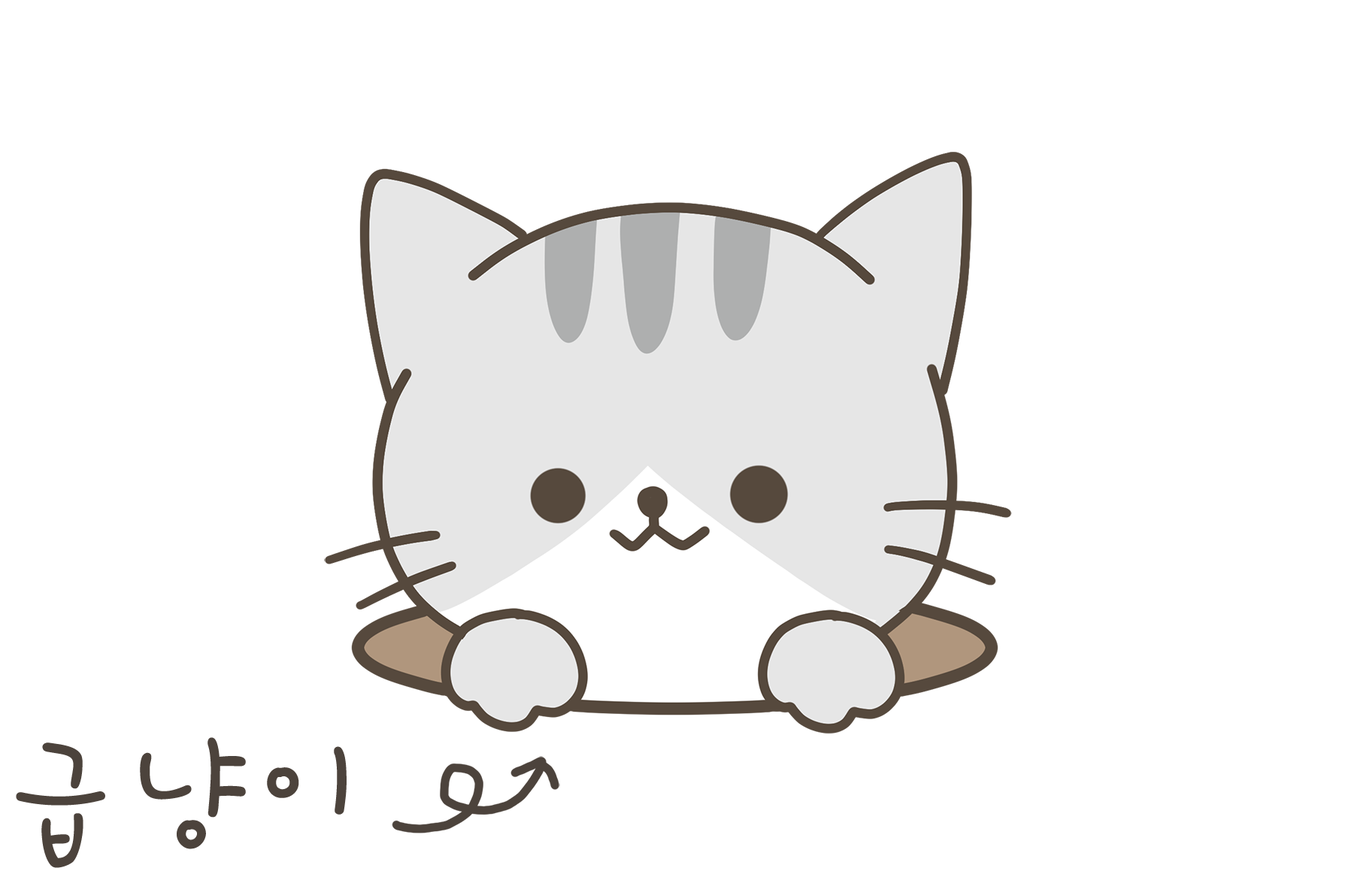
<style>
.page{position:relative;width:1360px;height:877px;background:#ffffff}
.page>*{position:absolute;margin:0}
.t1{font:153.5px "HiMelody-Regular";color:#4c433c}
</style>
<div class="page">
<p class="t1" style="left:16px;top:737px;width:330px;height:131px">급냥이</p>
</div>
